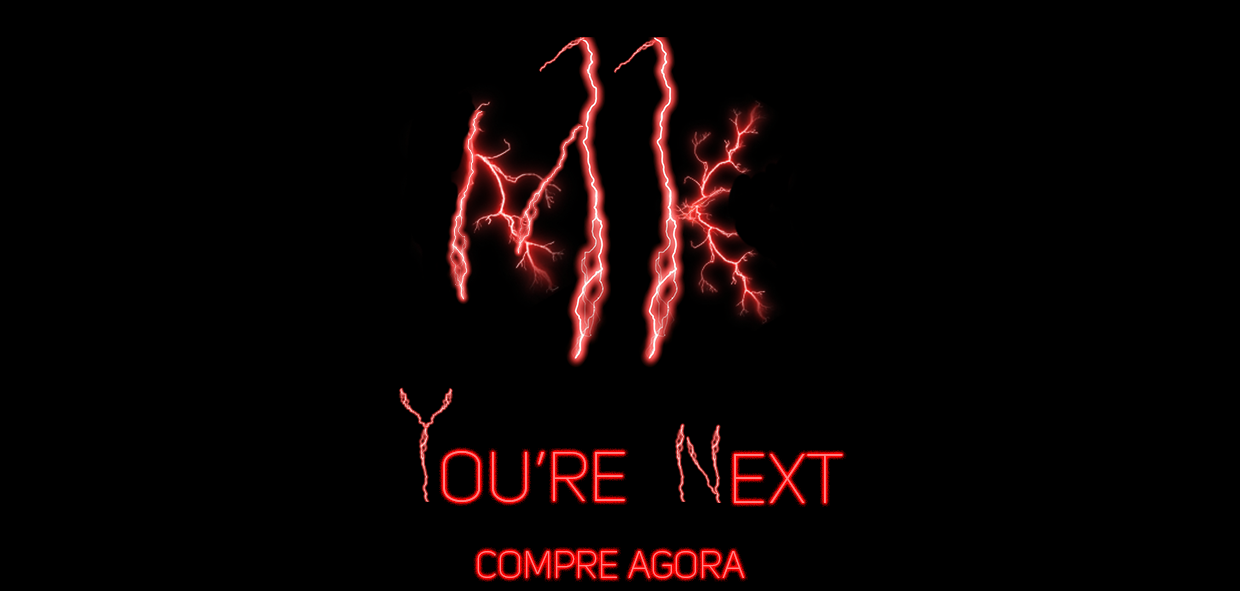
<style>
.page{position:relative;width:1240px;height:591px;background:#000000}
.page>*{position:absolute;margin:0}
.t1{font:69.6px "UniSansThinCAPS";color:#ff8383}
.t2{font:37.5px "UniSansThinCAPS";color:#ff8383}
</style>
<div class="page">
<p class="t1" style="left:443px;top:451px;width:182px;height:51px">ou’re</p>
<p class="t1" style="left:734px;top:454px;width:109px;height:49px">ext</p>
<p class="t2" style="left:477px;top:551px;width:267px;height:27px">Compre agora</p>
</div>
